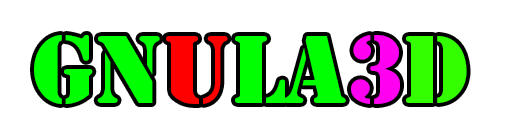
<style>
.page{position:relative;width:512px;height:128px;background:#ffffff}
.page>*{position:absolute;margin:0}
.t1{font:90px "StencilStd";color:#00ff00}
.t2{font:90px "StencilStd";color:#ff0000}
.t3{font:90px "StencilStd";color:#ff00f0}
.t4{font:90px "StencilStd";color:#33ff00}
</style>
<div class="page">
<p class="t1" style="left:34px;top:35px;width:433px;height:69px">GN<span class="t2">U</span>LA<span class="t3">3</span><span class="t4">D</span></p>
</div>
